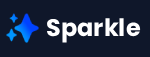
<style>
.page{position:relative;width:150px;height:57px;background:#0f172a}
.page>*{position:absolute;margin:0}
.t1{font:24px "Poppins-Bold";color:#ffffff}
</style>
<div class="page">
<p class="t1" style="left:47px;top:18px;width:94px;height:25px">Sparkle</p>
</div>
